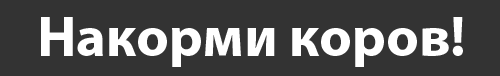
<style>
.page{position:relative;width:500px;height:76px;background:#333333}
.page>*{position:absolute;margin:0}
.t1{font:57px "MyriadPro-Bold";color:#ffffff}
</style>
<div class="page">
<p class="t1" style="left:41px;top:17px;width:422px;height:50px">Накорми коров!</p>
</div>
